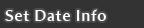
<style>
.page{position:relative;width:144px;height:28px;background:#333333}
.page>*{position:absolute;margin:0}
.t1{font:16px "AmiraParadiso";letter-spacing:0.05em;color:#ffffff}
</style>
<div class="page">
<p class="t1" style="left:5px;top:9px;width:101px;height:12px">Set Date Info</p>
</div>
